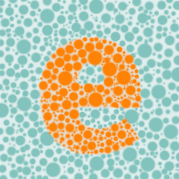
<style>
.page{position:relative;width:179px;height:179px}
.page>*{position:absolute;margin:0}
.t1{font:217px "MetaPro-Black";letter-spacing:-0.02em}
</style>
<div class="page">
<p class="t1" style="left:39px;top:37px;width:102px;height:118px">e</p>
</div>
